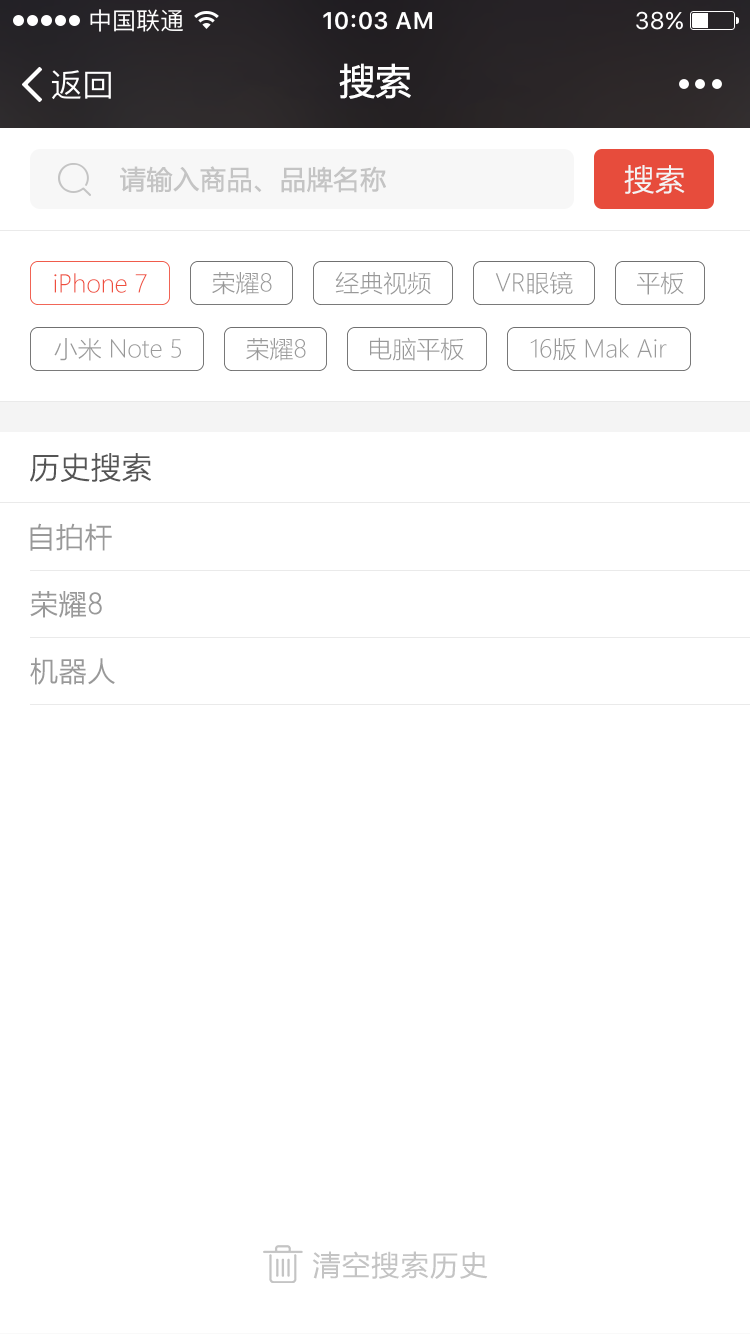
<style>
.page{position:relative;width:750px;height:1334px;background:#ffffff}
.page>*{position:absolute;margin:0}
.t1{font:36px "MicrosoftYaHei";color:#ffffff}
.t2{font:26px "MicrosoftYaHei";color:#c4c4c4;font-weight:bold}
.t3{font:30px "MicrosoftYaHeiLight";color:#f4f4f4;font-weight:bold}
.t4{font:24px "MicrosoftYaHeiLight";color:#ef4f3e}
.t5{font:24px "MicrosoftYaHeiLight";color:#999999}
.t6{font:30px "MicrosoftYaHeiLight";color:#555555;font-weight:bold}
.t7{font:28px "MicrosoftYaHeiLight";color:#999999;font-weight:bold}
.t8{font:28px "MicrosoftYaHei";letter-spacing:0.05em;color:#c4c4c4}
</style>
<div class="page">
<p class="t1" style="left:339px;top:63px;width:72px;height:36px">搜索</p>
<p class="t2" style="left:120px;top:166px;width:266px;height:27px">请输入商品、品牌名称</p>
<p class="t3" style="left:624px;top:165px;width:61px;height:29px">搜索</p>
<p class="t4" style="left:54px;top:273px;width:93px;height:20px">iPhone 7</p>
<p class="t5" style="left:212px;top:272px;width:60px;height:23px">荣耀8</p>
<p class="t5" style="left:335px;top:271px;width:96px;height:24px">经典视频</p>
<p class="t5" style="left:495px;top:271px;width:78px;height:24px">VR眼镜</p>
<p class="t5" style="left:637px;top:272px;width:47px;height:23px">平板</p>
<p class="t5" style="left:54px;top:338px;width:127px;height:23px">小米 Note 5</p>
<p class="t5" style="left:246px;top:338px;width:60px;height:23px">荣耀8</p>
<p class="t5" style="left:370px;top:337px;width:94px;height:24px">电脑平板</p>
<p class="t5" style="left:530px;top:338px;width:137px;height:23px">16版 Mak Air</p>
<p class="t6" style="left:30px;top:453px;width:121px;height:29px">历史搜索</p>
<p class="t7" style="left:30px;top:523px;width:82px;height:28px">自拍杆</p>
<p class="t7" style="left:30px;top:591px;width:72px;height:27px">荣耀8</p>
<p class="t7" style="left:30px;top:657px;width:85px;height:28px">机器人</p>
<p class="t8" style="left:312px;top:1251px;width:176px;height:28px">清空搜索历史</p>
</div>
